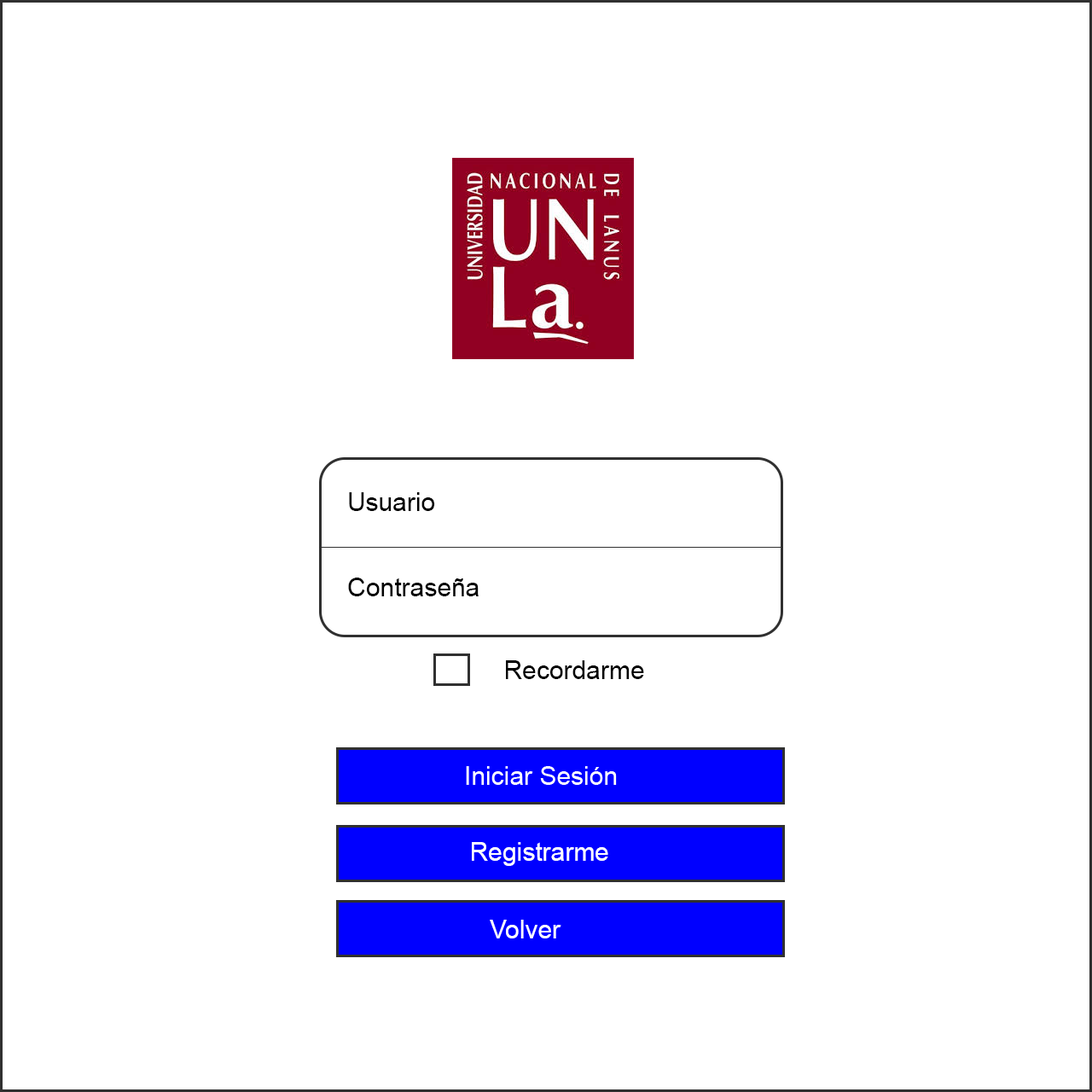
<style>
.page{position:relative;width:1092px;height:1092px;background:#ffffff}
.page>*{position:absolute;margin:0}
.t1{font:25.6px "ArialMT";color:#000000}
.t2{font:25.6px "ArialMT";color:#ffffff}
</style>
<div class="page">
<p class="t1" style="left:349px;top:492px;width:86px;height:19px">Usuario</p>
<p class="t1" style="left:348px;top:578px;width:131px;height:18px">Contraseña</p>
<p class="t1" style="left:506px;top:660px;width:138px;height:19px">Recordarme</p>
<p class="t2" style="left:472px;top:842px;width:136px;height:24px">Registrarme</p>
<p class="t2" style="left:490px;top:920px;width:71px;height:18px">Volver</p>
</div>
